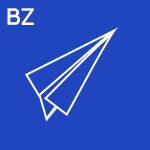
<style>
.page{position:relative;width:150px;height:150px;background:#1f45bf}
.page>*{position:absolute;margin:0}
.t1{font:40px "Code-Pro-Demo";letter-spacing:0.01em;color:#ffffff;text-transform:uppercase}
</style>
<div class="page">
<p class="t1" style="left:7px;top:8px;width:27px;height:17px">bz</p>
</div>
